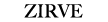
<style>
.page{position:relative;width:108px;height:22px;background:#ffffff}
.page>*{position:absolute;margin:0}
.t1{font:18px "BigCaslon-Medium";color:#000000}
</style>
<div class="page">
<p class="t1" style="left:24px;top:4px;width:59px;height:14px">ZIRVE</p>
</div>
